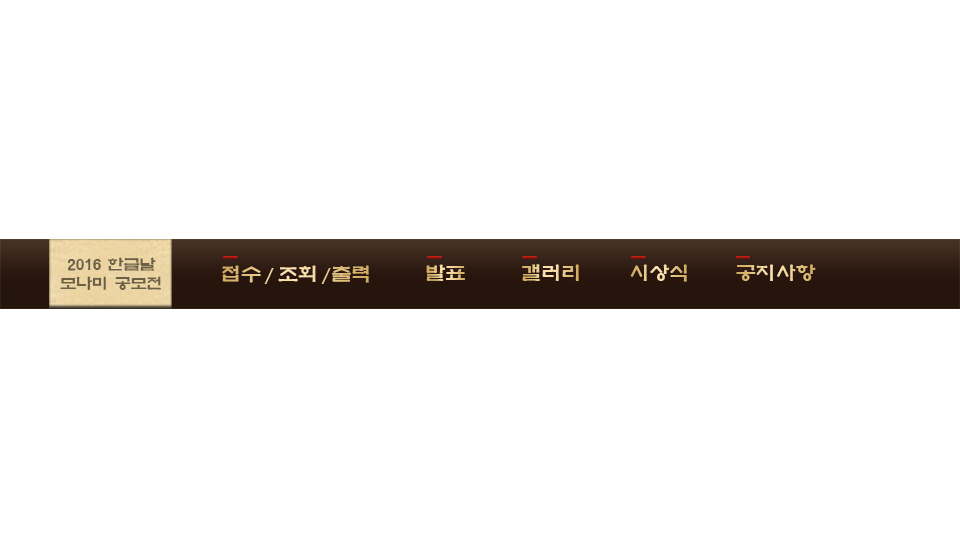
<style>
.page{position:relative;width:960px;height:540px;background:#ffffff}
.page>*{position:absolute;margin:0}
.t1{font:16px "YetR-HM";color:#6a5f47}
.t2{font:20px "YetR-HM"}
.t3{font:20px "FranklinGothic-MediumCond"}
</style>
<div class="page">
<p class="t1" style="left:60px;top:257px;width:101px;height:33px;text-align:center">2016 한글날<br>모나미 공모전</p>
<p class="t2" style="left:222px;top:265px;width:147px;height:19px">접수<span class="t3"> / </span>조회<span class="t3"> /</span>출력</p>
<p class="t2" style="left:426px;top:264px;width:39px;height:17px">발표</p>
<p class="t2" style="left:522px;top:264px;width:57px;height:17px">갤러리</p>
<p class="t2" style="left:630px;top:264px;width:57px;height:18px">시상식</p>
<p class="t2" style="left:736px;top:264px;width:80px;height:17px">공지사항</p>
</div>
